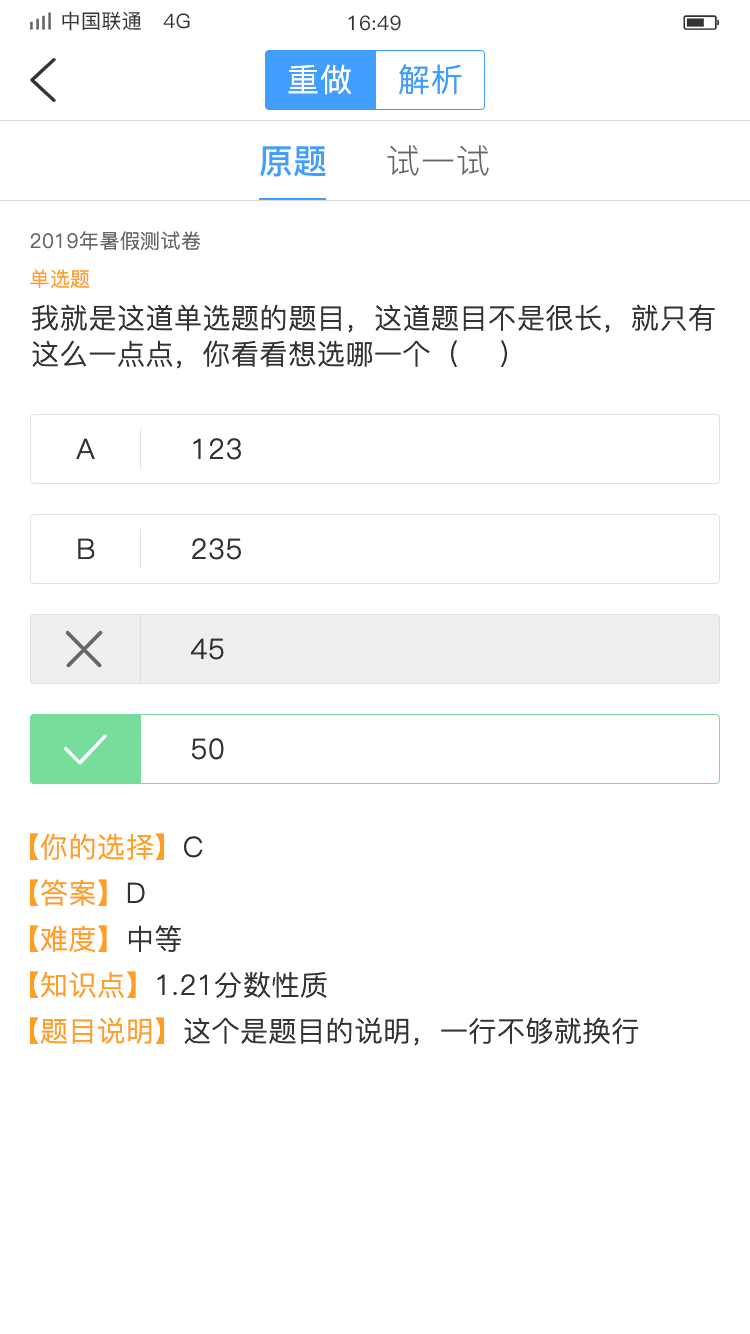
<style>
.page{position:relative;width:750px;height:1334px;background:#ffffff}
.page>*{position:absolute;margin:0}
.t1{font:20px "PingFang-SC-Medium";letter-spacing:0.02em;color:#333333}
.t2{font:32px "PingFang-SC-Regular";letter-spacing:0.02em;color:#ffffff}
.t3{font:32px "PingFang-SC-Regular";letter-spacing:0.02em;color:#409eff}
.t4{font:34px "PingFang-SC-Bold";color:#409eff}
.t5{font:34px "PingFang-SC-Regular";letter-spacing:0.02em;color:#666666}
.t6{font:20px "PingFang-SC-Regular";letter-spacing:0.02em;color:#666666}
.t7{font:20px "PingFang-SC-Regular";letter-spacing:0.02em;color:#ff9e21}
.t8{font:28px/36px "PingFang-SC-Regular";letter-spacing:0.02em;color:#333333}
.t9{font:28px "PingFang-SC-Regular";letter-spacing:0.02em;color:#333333}
.t10{font:28px "PingFang-SC-Regular";letter-spacing:0.02em;color:#ff9e21}
</style>
<div class="page">
<p class="t1" style="left:62px;top:11px;width:128px;height:20px">中国联通   4G</p>
<p class="t1" style="left:348px;top:15px;width:53px;height:16px">16:49</p>
<p class="t2" style="left:288px;top:64px;width:63px;height:31px">重做</p>
<p class="t3" style="left:399px;top:64px;width:63px;height:31px">解析</p>
<p class="t4" style="left:260px;top:146px;width:66px;height:31px">原题</p>
<p class="t5" style="left:387px;top:145px;width:102px;height:31px">试一试</p>
<p class="t6" style="left:30px;top:231px;width:171px;height:20px">2019年暑假测试卷</p>
<p class="t7" style="left:30px;top:269px;width:60px;height:19px">单选题</p>
<p class="t8" style="left:32px;top:304px;width:683px;height:65px">我就是这道单选题的题目，这道题目不是很长，就只有这么一点点，你看看想选哪一个（    ）</p>
<p class="t9" style="left:76px;top:438px;width:19px;height:21px">A</p>
<p class="t9" style="left:193px;top:438px;width:48px;height:22px">123</p>
<p class="t9" style="left:78px;top:538px;width:17px;height:21px">B</p>
<p class="t9" style="left:192px;top:538px;width:49px;height:22px">235</p>
<p class="t9" style="left:191px;top:638px;width:33px;height:22px">45</p>
<p class="t9" style="left:192px;top:738px;width:32px;height:22px">50</p>
<p class="t10" style="left:30px;top:833px;width:173px;height:27px">【你的选择】<span class="t9">C</span></p>
<p class="t10" style="left:30px;top:879px;width:115px;height:27px">【答案】<span class="t9">D</span></p>
<p class="t10" style="left:30px;top:925px;width:151px;height:27px">【难度】<span class="t9">中等</span></p>
<p class="t9" style="left:30px;top:971px;width:297px;height:27px"><span class="t10">【知识点】</span>1.21分数性质</p>
<p class="t9" style="left:30px;top:1017px;width:609px;height:29px"><span class="t10">【题目说明】</span>这个是题目的说明，一行不够就换行</p>
</div>
